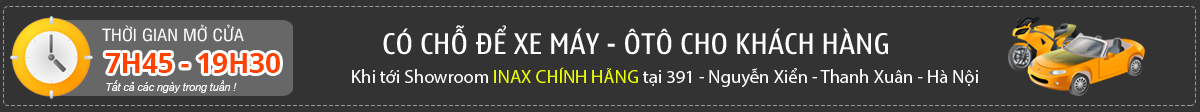
<style>
.page{position:relative;width:1200px;height:112px;background:#333333}
.page>*{position:absolute;margin:0}
.t1{font:16.2px "UTM-Swiss-Condensed";color:#ffffff;scale:1.15 1}
.t2{font:28.6px "UTM-Nokia-Standard";color:#ffffff}
.t3{font:27.6px "OpenSans-Bold";color:#ff4200}
.t4{font:18.6px "MyriadPro-Regular";color:#ffffff}
.t5{font:18.6px "MyriadPro-Regular";color:#eaff00}
.t6{font:10.6px "Arial-ItalicMT";color:#ffffff}
</style>
<div class="page">
<p class="t1" style="left:102px;top:24px;width:142px;height:18px">THỜI GIAN MỞ CỬA</p>
<p class="t2" style="left:383px;top:25px;width:505px;height:30px">CÓ CHỖ ĐỂ XE MÁY - ÔTÔ CHO KHÁCH HÀNG</p>
<p class="t3" style="left:105px;top:53px;width:175px;height:20px">7H45 - 19H30</p>
<p class="t4" style="left:352px;top:67px;width:626px;height:20px">Khi tới Showroom <span class="t5">INAX CHÍNH HÃNG </span>tại 391 - Nguyễn Xiển - Thanh Xuân - Hà Nội</p>
<p class="t6" style="left:106px;top:80px;width:131px;height:13px">Tất cả các ngày trong tuần !</p>
</div>
